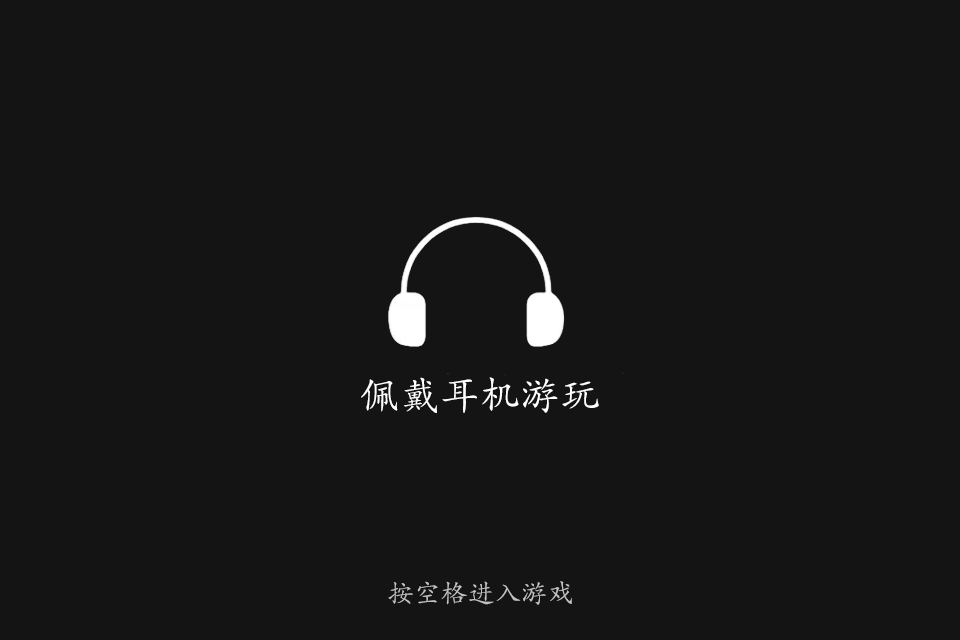
<style>
.page{position:relative;width:960px;height:640px;background:#141414}
.page>*{position:absolute;margin:0}
.t1{font:40px "STKaiti";color:#ffffff}
.t2{font:26.7px "STKaiti";color:#c2c2c2}
</style>
<div class="page">
<p class="t1" style="left:361px;top:377px;width:238px;height:36px">佩戴耳机游玩</p>
<p class="t2" style="left:388px;top:581px;width:184px;height:24px">按空格进入游戏</p>
</div>
